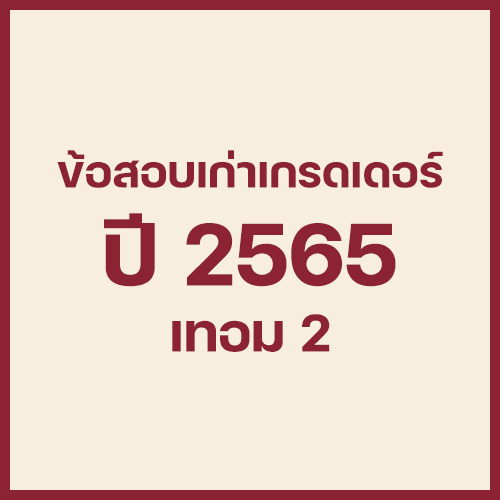
<style>
.page{position:relative;width:500px;height:500px;background:#f8eedf}
.page>*{position:absolute;margin:0}
.t1{font:60px "FCMinimalBold";color:#8b2332}
.t2{font:120px "FCMinimalBold";color:#8b2332}
.t3{font:72px "FCMinimalBold";color:#8b2332}
</style>
<div class="page">
<p class="t1" style="left:57px;top:150px;width:386px;height:38px">ข้อสอบเก่าเกรดเดอร์</p>
<p class="t2" style="left:104px;top:213px;width:292px;height:74px">ปี 2565</p>
<p class="t3" style="left:172px;top:314px;width:158px;height:38px">เทอม 2</p>
</div>
